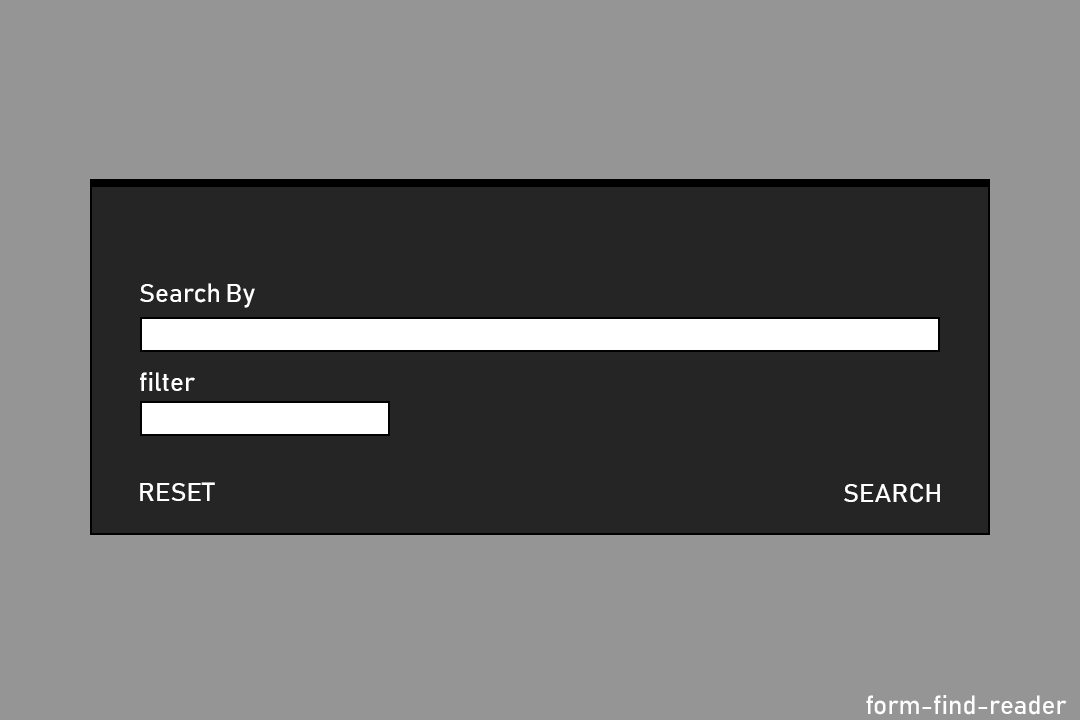
<style>
.page{position:relative;width:1080px;height:720px;background:#959595}
.page>*{position:absolute;margin:0}
.t1{font:26px "Bahnschrift";color:#ffffff}
.t2{font:26px "Bahnschrift";color:#fefefe}
</style>
<div class="page">
<p class="t1" style="left:140px;top:283px;width:115px;height:25px">Search By</p>
<p class="t1" style="left:140px;top:372px;width:55px;height:19px">filter</p>
<p class="t1" style="left:140px;top:482px;width:75px;height:19px">RESET</p>
<p class="t1" style="left:844px;top:483px;width:96px;height:20px">SEARCH</p>
<p class="t2" style="left:866px;top:695px;width:201px;height:20px">form-find-reader</p>
</div>
